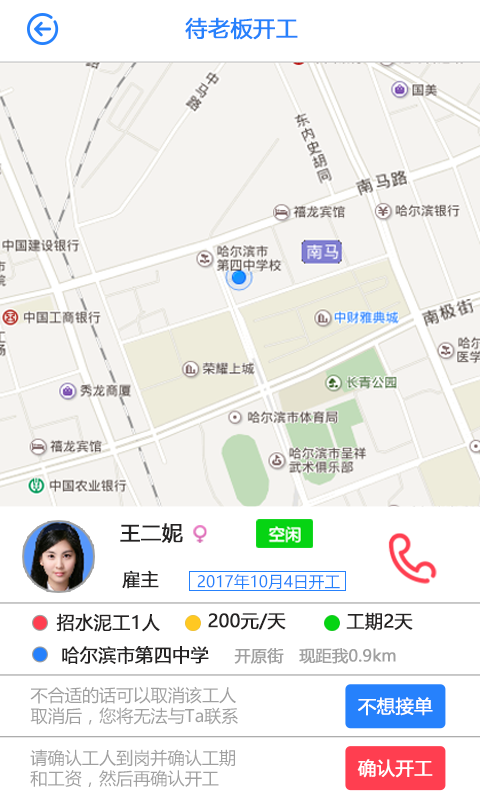
<style>
.page{position:relative;width:480px;height:800px;background:#ffffff}
.page>*{position:absolute;margin:0}
.t1{font:22px "MicrosoftYaHei";color:#2681fc;font-weight:bold}
.t2{font:20.6px "MicrosoftYaHei";color:#252323;font-weight:bold}
.t3{font:18px "MicrosoftYaHei";color:#252323;font-weight:bold}
.t4{font:15.8px "MicrosoftYaHei";color:#2681fc}
.t5{font:16px "MicrosoftYaHei";color:#a0a0a0;font-weight:bold}
.t6{font:17.1px "MicrosoftYaHei";color:#a0a0a0}
.t7{font:18.3px "MicrosoftYaHei";color:#ffffff;font-weight:bold}
</style>
<div class="page">
<p class="t1" style="left:185px;top:17px;width:113px;height:23px">待老板开工</p>
<p class="t2" style="left:120px;top:523px;width:63px;height:20px">王二妮</p>
<p class="t3" style="left:122px;top:570px;width:37px;height:19px">雇主</p>
<p class="t4" style="left:197px;top:574px;width:143px;height:16px">2017年10月4日开工</p>
<p class="t3" style="left:56px;top:613px;width:104px;height:19px">招水泥工1人</p>
<p class="t3" style="left:208px;top:613px;width:78px;height:17px">200元/天</p>
<p class="t3" style="left:346px;top:612px;width:67px;height:19px">工期2天</p>
<p class="t3" style="left:62px;top:646px;width:147px;height:18px">哈尔滨市第四中学</p>
<p class="t5" style="left:234px;top:648px;width:162px;height:16px">开原街   现距我0.9km</p>
<p class="t6" style="left:30px;top:686px;width:208px;height:39px">不合适的话可以取消该工人<br>取消后，您将无法与Ta联系</p>
<p class="t7" style="left:358px;top:697px;width:75px;height:19px">不想接单</p>
<p class="t6" style="left:30px;top:749px;width:205px;height:38px">请确认工人到岗并确认工期<br>和工资，然后再确认开工</p>
<p class="t7" style="left:357px;top:759px;width:76px;height:19px">确认开工</p>
</div>
